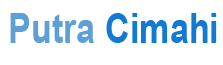
<style>
.page{position:relative;width:223px;height:65px;background:#ffffff}
.page>*{position:absolute;margin:0}
.t1{font:42.1px "Arial-BoldMT";color:#107ad4;scale:0.81 1}
.t2{font:42.1px "Arial-BoldMT";color:#5e9fd7;scale:0.81 1}
</style>
<div class="page">
<p class="t1" style="left:10px;top:13px;width:207px;height:30px"><span class="t2">Putra </span>Cimahi</p>
</div>
